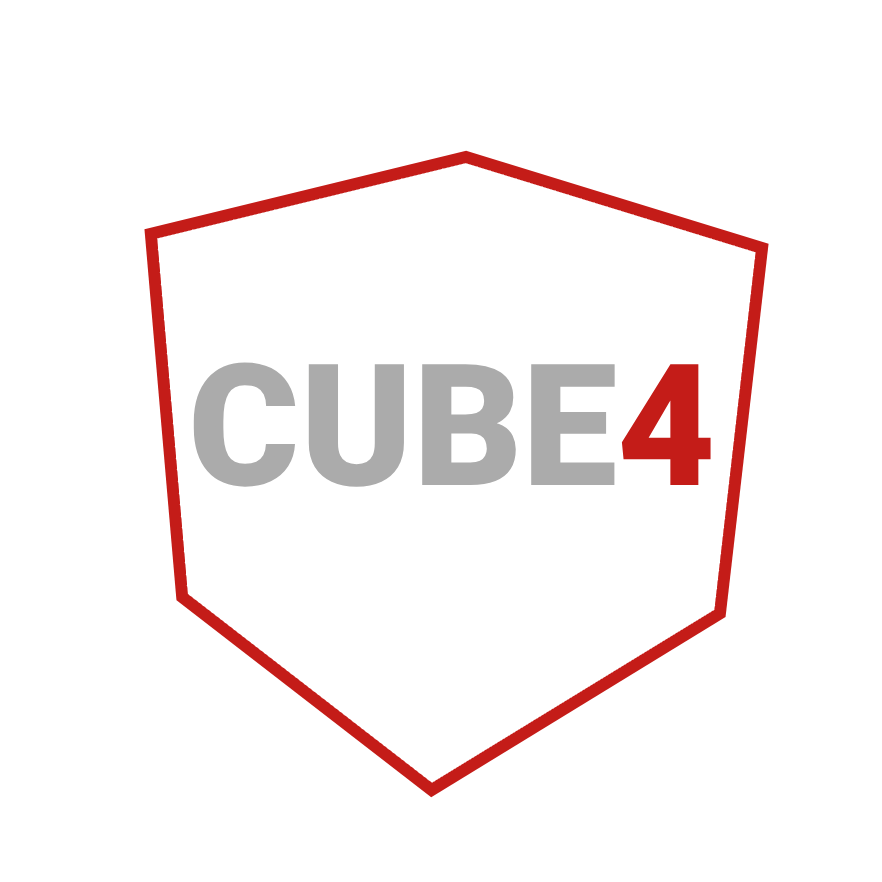
<style>
.page{position:relative;width:882px;height:882px;background:#ffffff}
.page>*{position:absolute;margin:0}
.t1{font:170px "Roboto-Regular_900.000wght_100.000wdth";color:#ababab}
.t2{font:170px "Roboto-Regular_900.000wght_100.000wdth";color:#c41c18}
</style>
<div class="page">
<p class="t1" style="left:193px;top:362px;width:518px;height:125px">CUBE<span class="t2">4</span></p>
</div>
